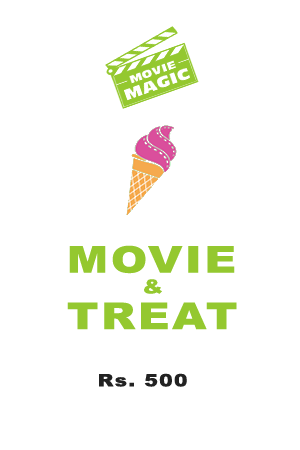
<style>
.page{position:relative;width:300px;height:450px;background:#ffffff}
.page>*{position:absolute;margin:0}
.t1{font:36.8px "Arial-Black";letter-spacing:0.06em;color:#94c82f;scale:1.19 1}
.t2{font:19.3px "Arial-Black";letter-spacing:0.06em;color:#94c82f;scale:1.19 1}
.t3{font:17.1px "Arial-Black";letter-spacing:0.06em;color:#222222;scale:1.19 1}
</style>
<div class="page">
<p class="t1" style="left:69px;top:245px;width:166px;height:29px">MOVIE</p>
<p class="t2" style="left:144px;top:279px;width:18px;height:15px">&amp;</p>
<p class="t1" style="left:67px;top:302px;width:170px;height:28px">TREAT</p>
<p class="t3" style="left:99px;top:373px;width:88px;height:14px">Rs. 500</p>
</div>
